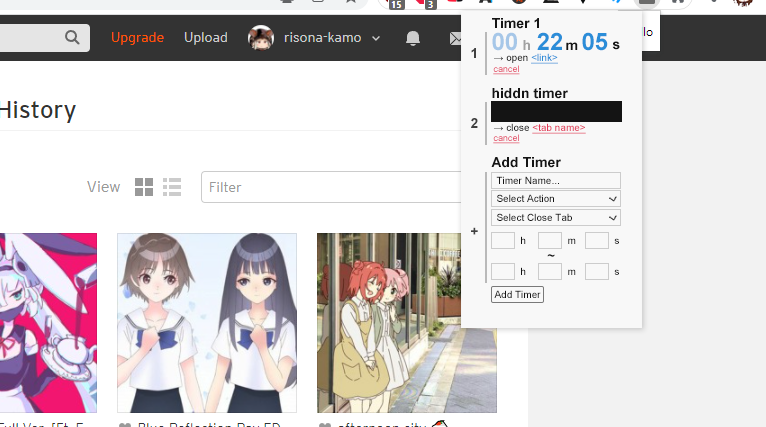
<style>
.page{position:relative;width:766px;height:427px;background:#ffffff}
.page>*{position:absolute;margin:0}
.t1{font:14px "Arial-BoldMT";color:#141414}
.t2{font:24px "Arial-BoldMT";color:#a6c7e8}
.t3{font:14px "Arial-BoldMT";color:#a1a1a1}
.t4{font:24px "Arial-BoldMT";color:#2b8dd8}
.t5{font:14px "Arial-BoldMT";color:#404040}
.t6{font:10px "ArialMT";color:#141414}
.t7{font:10px "ArialMT";color:#2b8dd8;text-decoration:underline}
.t8{font:9px "ArialMT";color:#e23757;text-decoration:underline}
.t9{font:10px "ArialMT";color:#e23757;text-decoration:underline}
.t10{font:10px "ArialMT"}
.t11{font:13px "Arial-BoldMT";color:#141414}
</style>
<div class="page">
<p class="t1" style="left:492px;top:18px;width:47px;height:11px">Timer 1</p>
<p class="t2" style="left:492px;top:32px;width:25px;height:19px">00</p>
<p class="t3" style="left:523px;top:40px;width:7px;height:10px">h</p>
<p class="t4" style="left:537px;top:32px;width:25px;height:18px">22</p>
<p class="t4" style="left:582px;top:32px;width:26px;height:19px">05</p>
<p class="t1" style="left:612px;top:41px;width:8px;height:9px">s</p>
<p class="t5" style="left:471px;top:48px;width:5px;height:10px">1</p>
<p class="t6" style="left:494px;top:53px;width:64px;height:11px">→ open <span class="t7">&lt;link&gt;</span></p>
<p class="t1" style="left:566px;top:42px;width:12px;height:8px">m</p>
<p class="t8" style="left:493px;top:65px;width:27px;height:10px">cancel</p>
<p class="t1" style="left:492px;top:88px;width:76px;height:11px">hiddn timer</p>
<p class="t5" style="left:471px;top:118px;width:7px;height:10px">2</p>
<p class="t9" style="left:494px;top:123px;width:92px;height:11px"><span class="t6">→ close </span>&lt;tab name&gt;</p>
<p class="t8" style="left:493px;top:134px;width:27px;height:10px">cancel</p>
<p class="t1" style="left:491px;top:157px;width:70px;height:11px">Add Timer</p>
<p class="t6" style="left:496px;top:176px;width:63px;height:8px">Timer Name...</p>
<p class="t6" style="left:497px;top:194px;width:57px;height:8px">Select Action</p>
<p class="t6" style="left:497px;top:213px;width:75px;height:8px">Select Close Tab</p>
<p class="t5" style="left:471px;top:227px;width:7px;height:8px">+</p>
<p class="t6" style="left:521px;top:236px;width:5px;height:8px">h</p>
<p class="t10" style="left:568px;top:238px;width:8px;height:6px">m</p>
<p class="t6" style="left:614px;top:238px;width:5px;height:6px">s</p>
<p class="t11" style="left:547px;top:254px;width:8px;height:3px">~</p>
<p class="t6" style="left:521px;top:267px;width:5px;height:8px">h</p>
<p class="t10" style="left:568px;top:269px;width:8px;height:6px">m</p>
<p class="t6" style="left:614px;top:269px;width:5px;height:6px">s</p>
<p class="t6" style="left:494px;top:290px;width:47px;height:8px">Add Timer</p>
</div>
